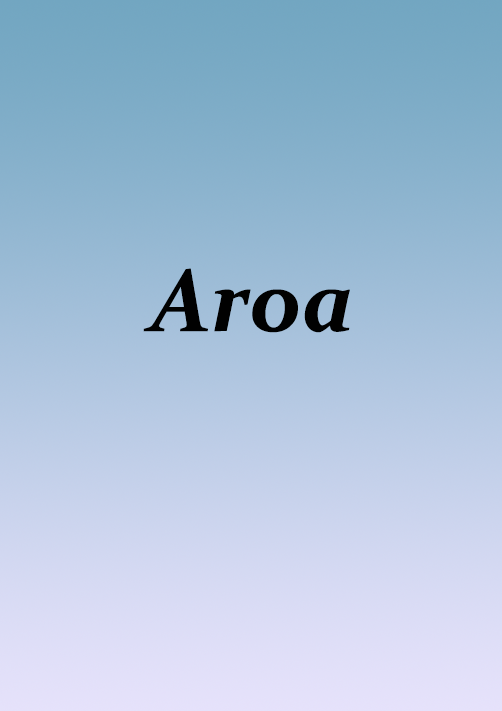
<style>
.page{position:relative;width:502px;height:711px}
.page>*{position:absolute;margin:0}
.t1{font:90px "Constantia-BoldItalic";color:#010101}
</style>
<div class="page">
<p class="t1" style="left:143px;top:268px;width:207px;height:65px">Aroa</p>
</div>
